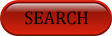
<style>
.page{position:relative;width:112px;height:36px}
.page>*{position:absolute;margin:0}
.t1{font:18.4px "Cambria";color:#000000}
</style>
<div class="page">
<p class="t1" style="left:25px;top:11px;width:63px;height:14px">SEARCH</p>
</div>
